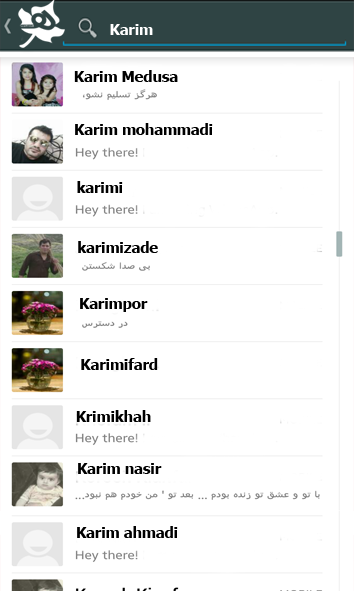
<style>
.page{position:relative;width:354px;height:591px;background:#ffffff}
.page>*{position:absolute;margin:0}
.t1{font:14.6px "BNazaninBold";color:#ffffff}
.t2{font:14.6px "BNazaninBold";color:#000000}
</style>
<div class="page">
<p class="t1" style="left:110px;top:24px;width:43px;height:11px">Karim</p>
<p class="t2" style="left:74px;top:70px;width:104px;height:12px">Karim Medusa</p>
<p class="t2" style="left:75px;top:123px;width:138px;height:12px">Karim mohammadi</p>
<p class="t2" style="left:77px;top:181px;width:46px;height:12px">karimi</p>
<p class="t2" style="left:78px;top:241px;width:80px;height:12px">karimizade</p>
<p class="t2" style="left:80px;top:298px;width:68px;height:14px">Karimpor</p>
<p class="t2" style="left:81px;top:358px;width:77px;height:12px">Karimifard</p>
<p class="t2" style="left:76px;top:410px;width:75px;height:12px">Krimikhah</p>
<p class="t2" style="left:78px;top:463px;width:84px;height:11px">Karim nasir</p>
<p class="t2" style="left:77px;top:526px;width:101px;height:12px">Karim ahmadi</p>
</div>
